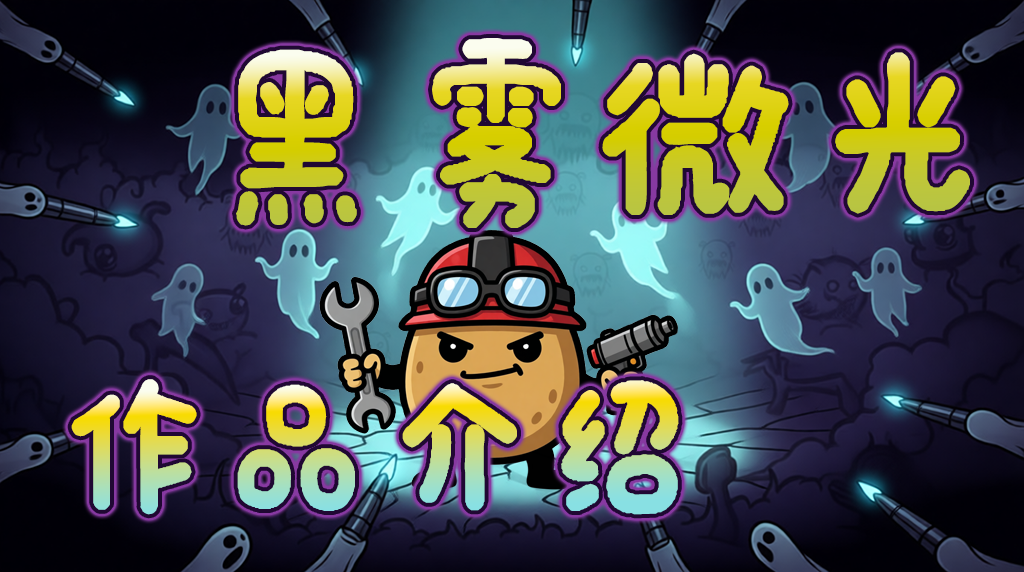
<style>
.page{position:relative;width:1024px;height:572px}
.page>*{position:absolute;margin:0}
.t1{font:211.4px "RXXXKAT";letter-spacing:0.025em;scale:0.93 1}
.t2{font:170.4px "RXXXKAT";letter-spacing:0.025em;scale:0.92 1}
</style>
<div class="page">
<p class="t1" style="left:236px;top:38px;width:734px;height:190px">黑雾微光</p>
<p class="t2" style="left:71px;top:379px;width:608px;height:136px">作品介绍</p>
</div>
